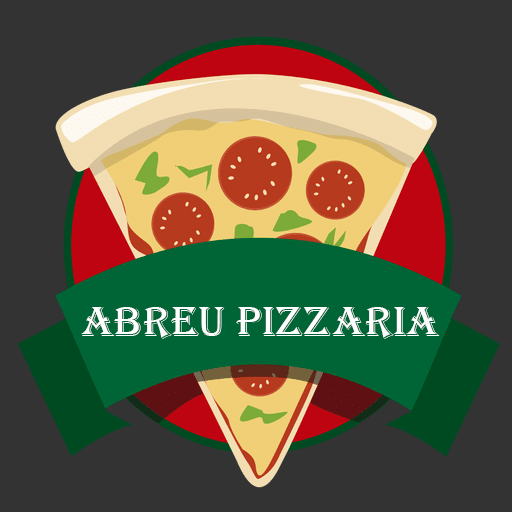
<style>
.page{position:relative;width:512px;height:512px;background:#333333}
.page>*{position:absolute;margin:0}
.t1{font:44px "Algerian";color:#ffffff}
</style>
<div class="page">
<p class="t1" style="left:81px;top:307px;width:359px;height:32px">abreu pizzaria</p>
</div>
